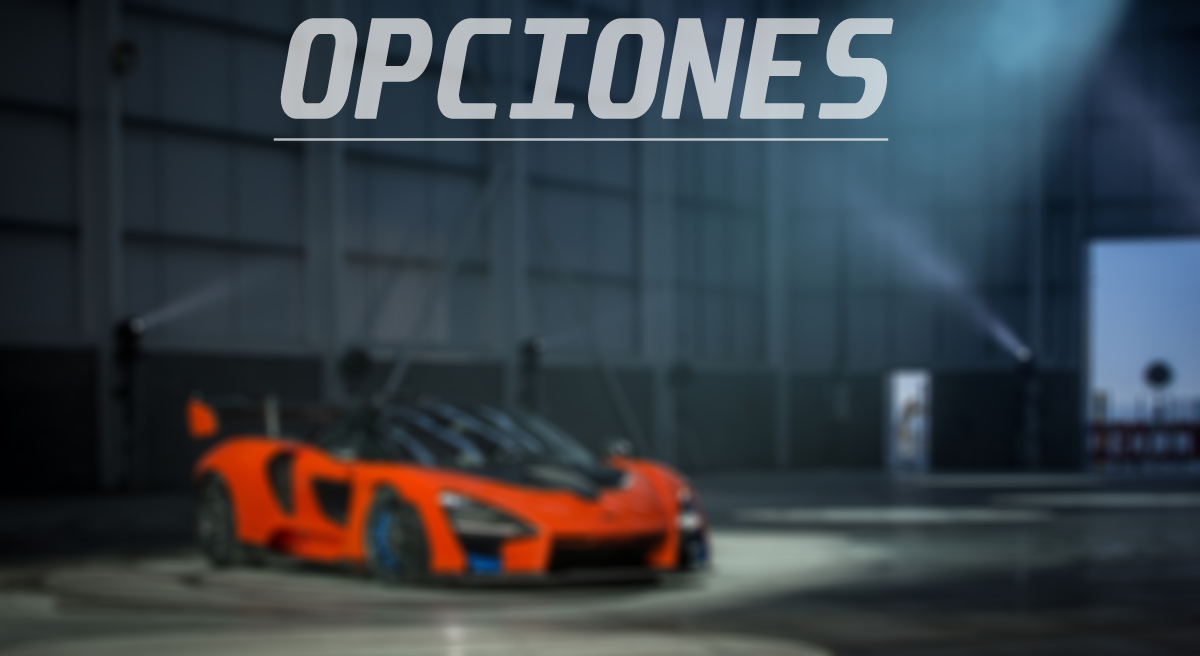
<style>
.page{position:relative;width:1200px;height:656px}
.page>*{position:absolute;margin:0}
.t1{font:120px "Unispace-Bold";color:#babfc4;font-weight:bold;font-style:italic;text-decoration:underline}
</style>
<div class="page">
<p class="t1" style="left:273px;top:18px;width:621px;height:123px">OPCIONES</p>
</div>
